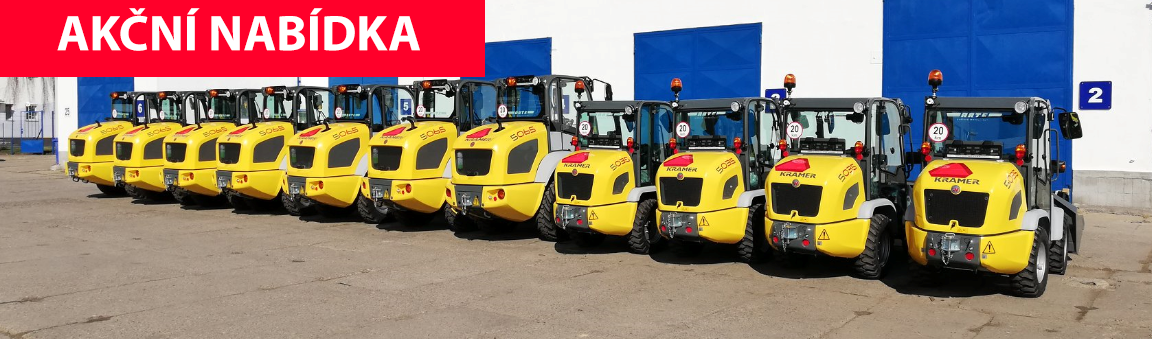
<style>
.page{position:relative;width:1152px;height:339px}
.page>*{position:absolute;margin:0}
.t1{font:50.5px "MyriadPro-Bold";color:#ffffff}
</style>
<div class="page">
<p class="t1" style="left:57px;top:8px;width:363px;height:43px">AKČNÍ NABÍDKA</p>
</div>
